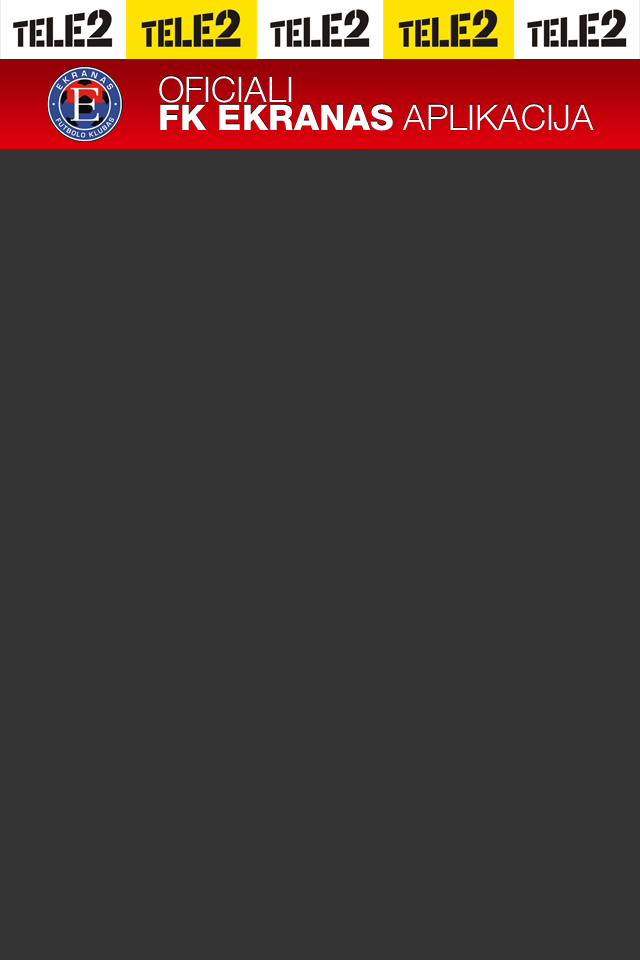
<style>
.page{position:relative;width:640px;height:960px;background:#333333}
.page>*{position:absolute;margin:0}
.t1{font:35.5px/28.1px "HelveticaNeueLTPro-Hv";color:#ffffff}
.t2{font:35.5px/28.1px "HelveticaNeueLTPro-Lt";color:#ffffff}
</style>
<div class="page">
<p class="t1" style="left:159px;top:76px;width:435px;height:55px"><span class="t2">OFICIALI<br></span>FK EKRANAS<span class="t2"> APLIKACIJA</span></p>
</div>
